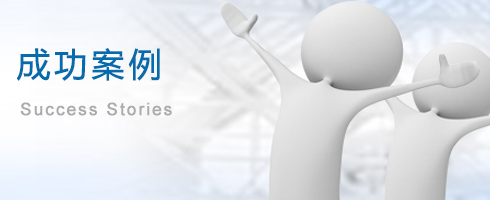
<style>
.page{position:relative;width:490px;height:200px}
.page>*{position:absolute;margin:0}
.t1{font:33px "MicrosoftYaHei";letter-spacing:0.1em;color:#046bad;font-weight:bold}
.t2{font:17px "ArialMT";letter-spacing:0.1em;color:#ababab;font-weight:bold}
</style>
<div class="page">
<p class="t1" style="left:16px;top:48px;width:144px;height:33px">成功案例</p>
<p class="t2" style="left:20px;top:102px;width:152px;height:14px">Success Stories</p>
</div>
